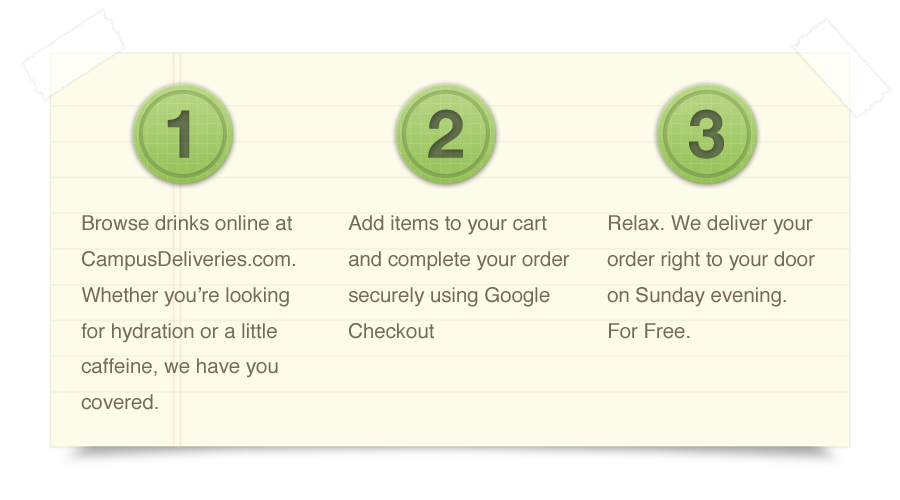
<style>
.page{position:relative;width:900px;height:500px;background:#fdfbe9}
.page>*{position:absolute;margin:0}
.t1{font:67.2px "HelveticaNeue-Bold";color:#5e6b49}
.t2{font:67.2px "HelveticaNeue-Bold";color:#5d6a48}
.t3{font:67.2px "HelveticaNeue-Bold";color:#5c6a47}
.t4{font:20.4px/35.7px "Helvetica";color:#766958}
</style>
<div class="page">
<p class="t1" style="left:167px;top:110px;width:23px;height:48px">1</p>
<p class="t2" style="left:428px;top:109px;width:35px;height:49px">2</p>
<p class="t3" style="left:689px;top:109px;width:35px;height:50px">3</p>
<p class="t4" style="left:81px;top:215px;width:214px;height:195px">Browse drinks online at CampusDeliveries.com. Whether you’re looking for hydration or a little caffeine, we have you covered.</p>
<p class="t4" style="left:348px;top:215px;width:222px;height:124px">Add items to your cart and complete your order securely using Google Checkout</p>
<p class="t4" style="left:607px;top:215px;width:208px;height:124px">Relax. We deliver your order right to your door on Sunday evening. <br>For Free.</p>
</div>
